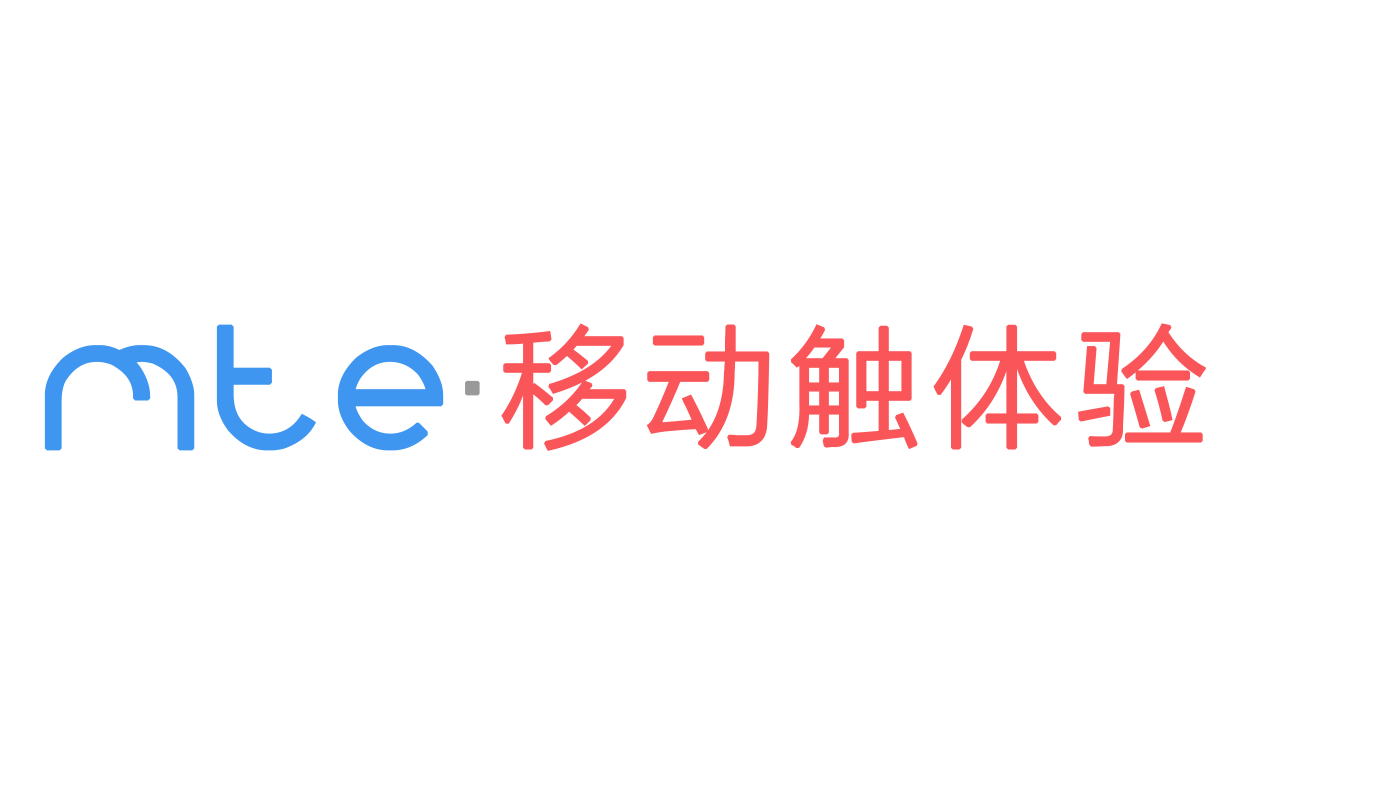
<style>
.page{position:relative;width:1400px;height:800px;background:#ffffff}
.page>*{position:absolute;margin:0}
.t1{font:175px "alberto";letter-spacing:0.08em;color:#3e96f0;font-weight:bold}
.t2{font:130px "FZLTXHK--GBK1-0";letter-spacing:0.08em;color:#fa565a;font-weight:bold}
.t3{font:120px "FZLTXHK--GBK1-0";letter-spacing:0.08em;color:#999999;font-weight:bold}
</style>
<div class="page">
<p class="t1" style="left:44px;top:324px;width:400px;height:127px">mte</p>
<p class="t2" style="left:501px;top:323px;width:705px;height:128px">移动触体验</p>
<p class="t3" style="left:465px;top:380px;width:15px;height:16px">.</p>
</div>
